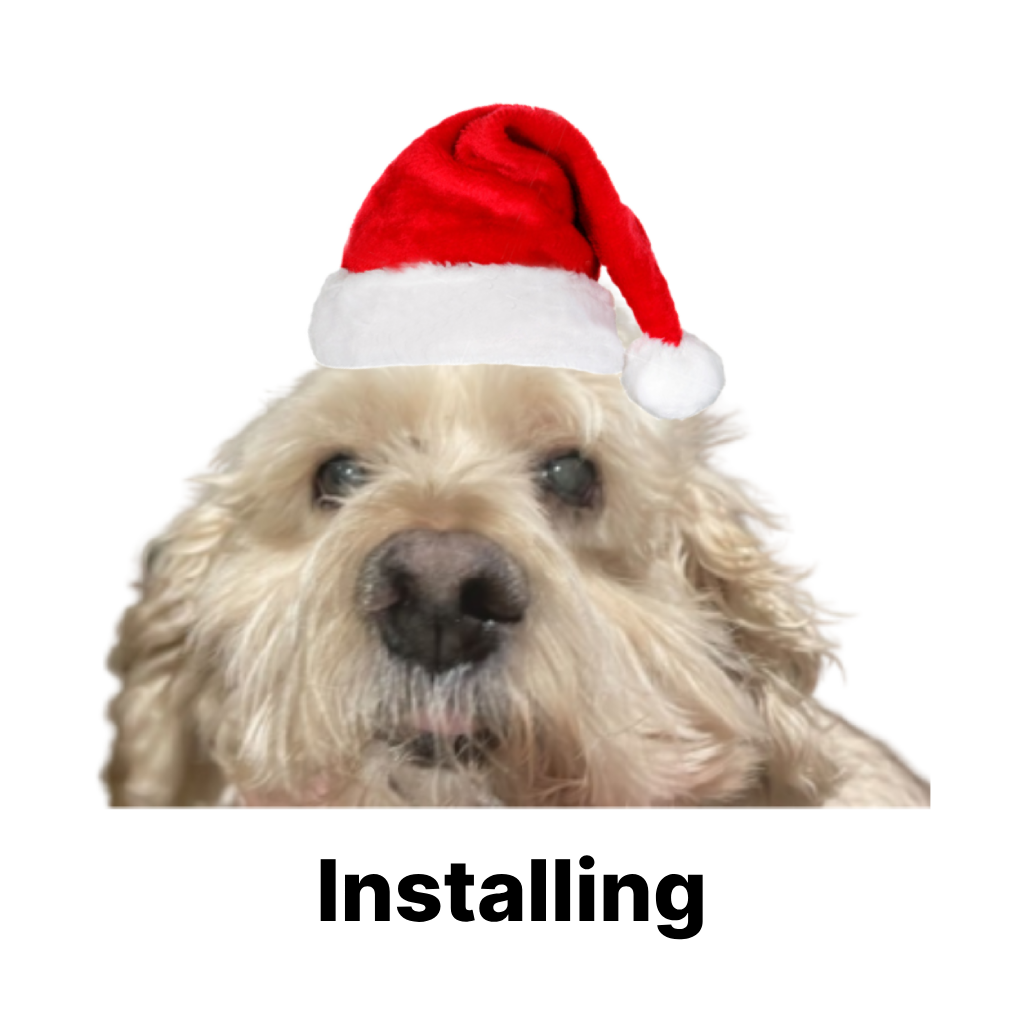
<style>
.page{position:relative;width:1024px;height:1024px;background:#ffffff}
.page>*{position:absolute;margin:0}
.t1{font:85px "Inter-ExtraBold";color:#000000}
</style>
<div class="page">
<p class="t1" style="left:320px;top:855px;width:383px;height:85px">Installing</p>
</div>
